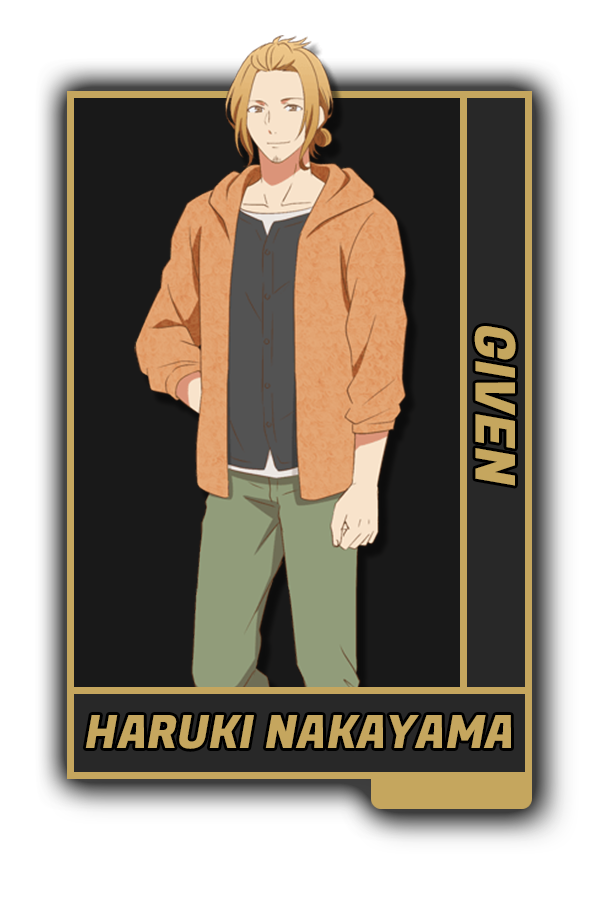
<style>
.page{position:relative;width:600px;height:900px;background:#ffffff}
.page>*{position:absolute;margin:0}
.t1{font:54.9px "FugazOne-Regular";color:#c5a65e}
.t2{font:46px "FugazOne-Regular";color:#c5a65e}
</style>
<div class="page">
<p class="t1" style="left:474px;top:326px;width:42px;height:160px;rotate:90deg">GIVEN</p>
<p class="t2" style="left:85px;top:715px;width:426px;height:34px">HARUKI NAKAYAMA</p>
</div>
